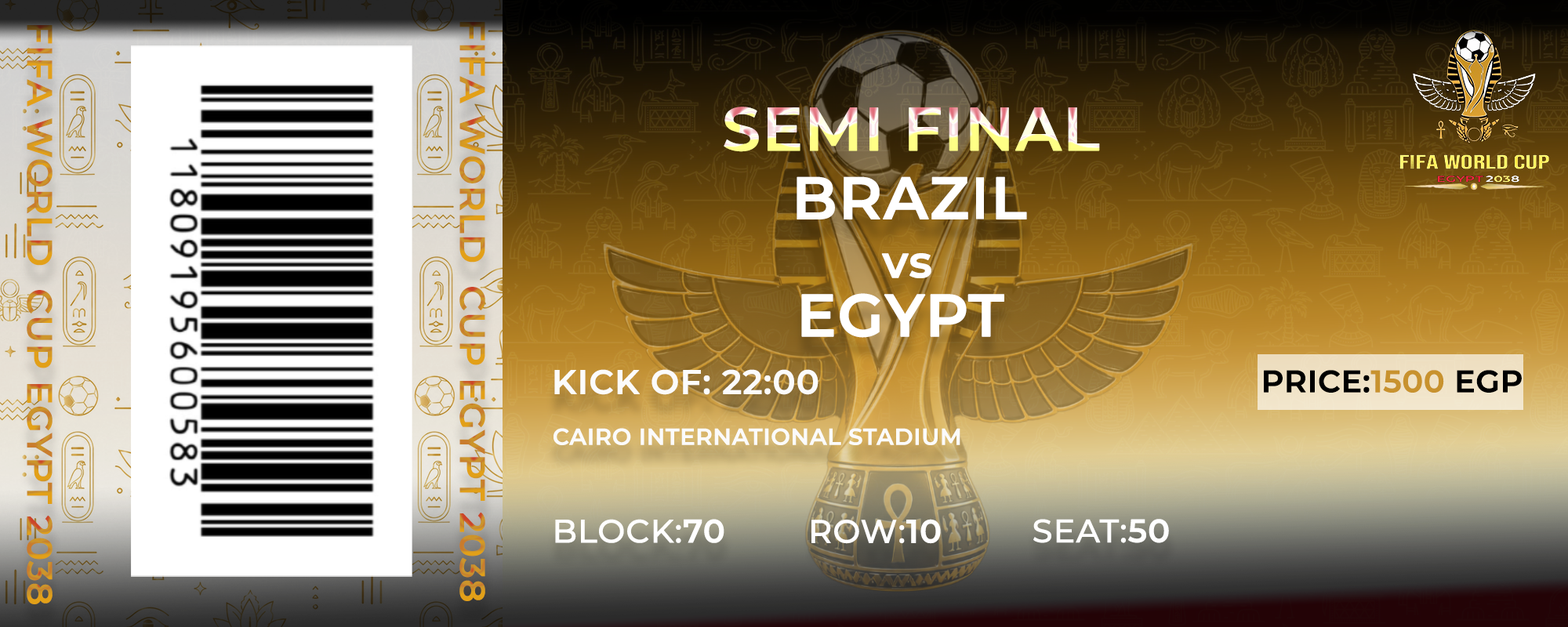
<style>
.page{position:relative;width:1568px;height:627px}
.page>*{position:absolute;margin:0}
.t1{font:35.2px "Montserrat-SemiBold";color:#c8922e;font-weight:bold}
.t2{font:60.9px "Montserrat-SemiBold";font-weight:bold}
.t3{font:59.4px/58.6px "Montserrat-SemiBold";color:#ffffff;font-weight:bold}
.t4{font:44.6px/58.6px "Montserrat-SemiBold";color:#ffffff;font-weight:bold}
.t5{font:34px "Montserrat-SemiBold";color:#fbfbfb;font-weight:bold}
.t6{font:30.8px "Montserrat-SemiBold";color:#000000;font-weight:bold}
.t7{font:30.8px "Montserrat-SemiBold";color:#c8922e;font-weight:bold}
.t8{font:22.7px "Montserrat-SemiBold";color:#fbfbfb;font-weight:bold}
.t9{font:32.7px "Montserrat-Medium";color:#ffffff;font-weight:bold}
.t10{font:32.7px "Montserrat-SemiBold";color:#ffffff;font-weight:bold}
</style>
<div class="page">
<p class="t1" style="left:27px;top:25px;width:26px;height:579px;rotate:90deg">2038 FIFA WORLD  CUP EGYPT</p>
<p class="t1" style="left:459px;top:22px;width:26px;height:579px;rotate:90deg">2038 FIFA WORLD  CUP EGYPT</p>
<p class="t2" style="left:724px;top:107px;width:376px;height:45px">SEMI FINAL</p>
<p class="t3" style="left:797px;top:176px;width:230px;height:162px;text-align:center">BRAZIL <br><span class="t4">vs <br></span>EGYPT</p>
<p class="t5" style="left:554px;top:369px;width:264px;height:26px">22:00 :KICK OF</p>
<p class="t6" style="left:1264px;top:370px;width:258px;height:23px">EGP<span class="t7"> 1500</span>:PRICE</p>
<p class="t8" style="left:554px;top:428px;width:406px;height:17px">CAIRO INTERNATIONAL STADIUM</p>
<p class="t9" style="left:555px;top:519px;width:169px;height:24px"><span class="t10">70</span>:BLOCK</p>
<p class="t9" style="left:811px;top:519px;width:130px;height:25px"><span class="t10">10</span>:ROW</p>
<p class="t9" style="left:1033px;top:519px;width:136px;height:24px"><span class="t10">50</span>:SEAT</p>
</div>
